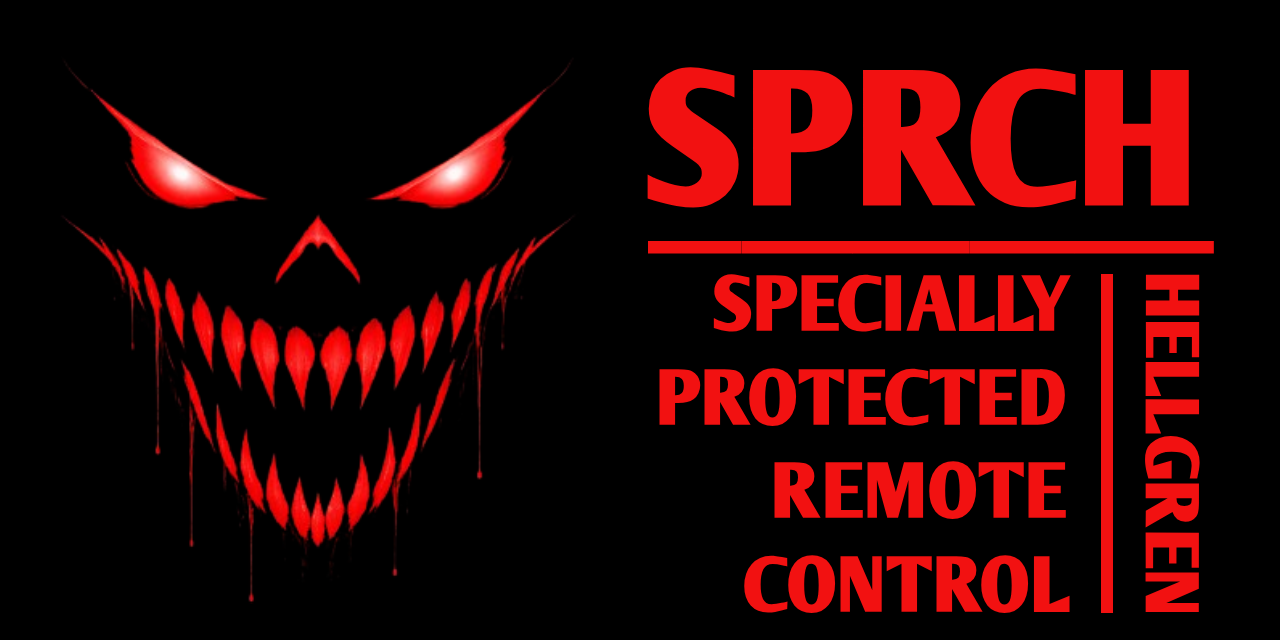
<style>
.page{position:relative;width:1280px;height:640px;background:#000000}
.page>*{position:absolute;margin:0}
.t1{font:190px "ArmWrestler-Bold";color:#f21111;text-decoration:underline}
.t2{font:77.8px "ArmWrestler-Bold";color:#f21111}
.t3{font:74.6px "ArmWrestler-Bold";color:#f21111}
</style>
<div class="page">
<p class="t1" style="left:647px;top:67px;width:567px;height:187px">SPRCH</p>
<p class="t2" style="left:659px;top:274px;width:412px;height:340px;text-align:right">SPECIALLY<br>PROTECTED<br>REMOTE<br>CONTROL</p>
<p class="t3" style="left:1145px;top:274px;width:55px;height:338px;rotate:90deg">HELLGREN</p>
</div>
